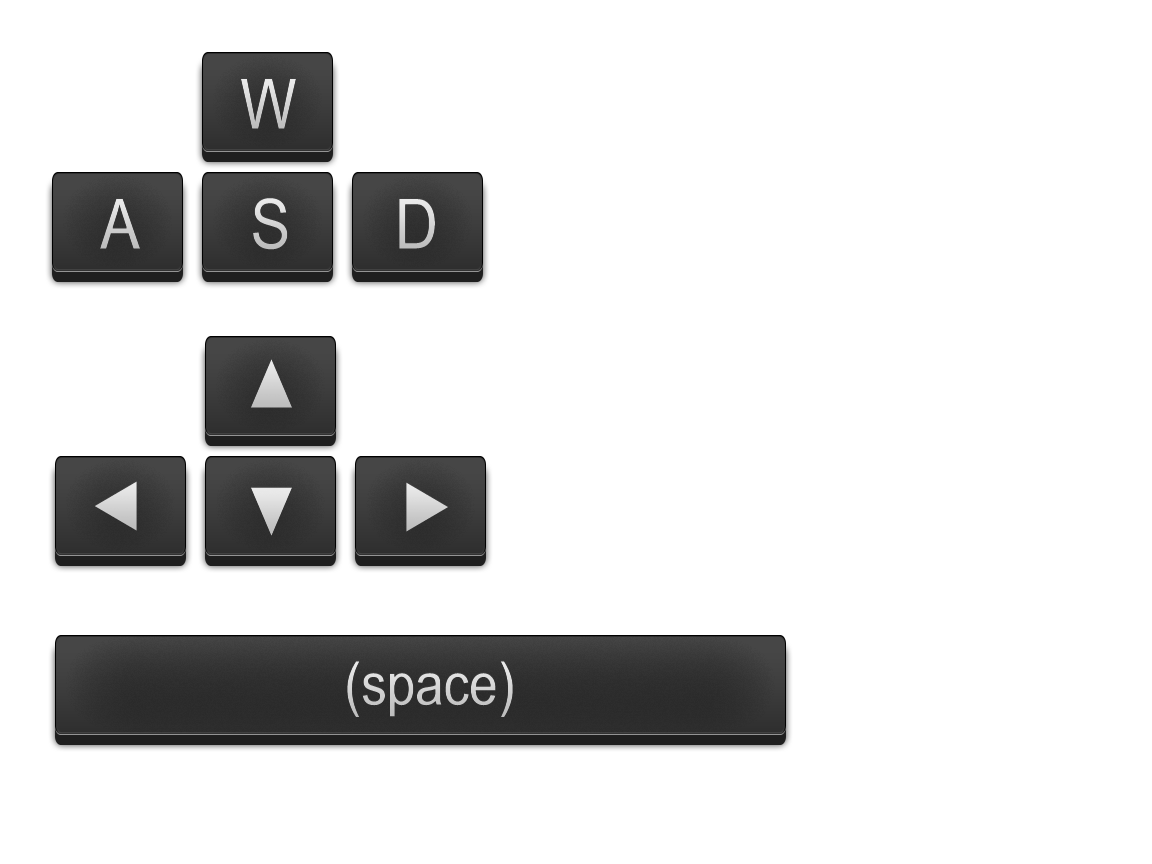
<style>
.page{position:relative;width:1152px;height:864px;background:#ffffff}
.page>*{position:absolute;margin:0}
.t1{font:70.1px "ArialMT";color:#d4d4d4;scale:0.85 1}
.t2{font:70.1px "ArialMT";color:#cecece;scale:0.85 1}
.t3{font:70.1px "ArialMT";scale:0.85 1}
.t4{font:70.1px "ArialMT";color:#d2d2d2;scale:0.85 1}
.t5{font:70.1px "ArialMT";color:#c9c9c9;scale:0.85 1}
.t6{font:70.1px "ArialMT";color:#d3d3d3;scale:0.85 1}
.t7{font:70.1px "ArialMT";color:#dedede;scale:0.85 1}
.t8{font:60px "ArialMT";color:#d0d0d0;scale:0.85 1}
</style>
<div class="page">
<p class="t1" style="left:240px;top:78px;width:56px;height:51px">W</p>
<p class="t2" style="left:100px;top:198px;width:41px;height:51px">A</p>
<p class="t3" style="left:253px;top:197px;width:35px;height:53px">S</p>
<p class="t4" style="left:399px;top:198px;width:36px;height:51px">D</p>
<p class="t5" style="left:250px;top:358px;width:43px;height:50px">▲</p>
<p class="t6" style="left:94px;top:480px;width:43px;height:51px">◄</p>
<p class="t7" style="left:250px;top:486px;width:43px;height:50px">▼</p>
<p class="t6" style="left:406px;top:481px;width:43px;height:51px">►</p>
<p class="t8" style="left:347px;top:660px;width:166px;height:57px">(space)</p>
</div>
